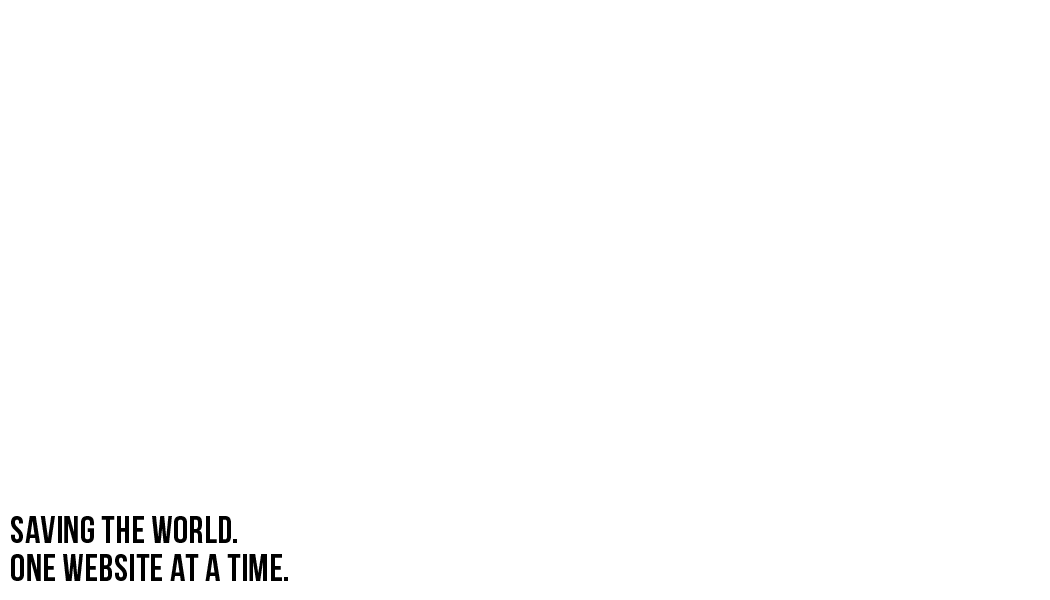
<style>
.page{position:relative;width:1050px;height:600px;background:#ffffff}
.page>*{position:absolute;margin:0}
.t1{font:37.5px/37.5px "BebasNeue";letter-spacing:0.01em;color:#000000}
</style>
<div class="page">
<p class="t1" style="left:11px;top:516px;width:277px;height:65px">SAVING THE WORLD.<br>ONE WEBSITE AT A TIME.</p>
</div>
